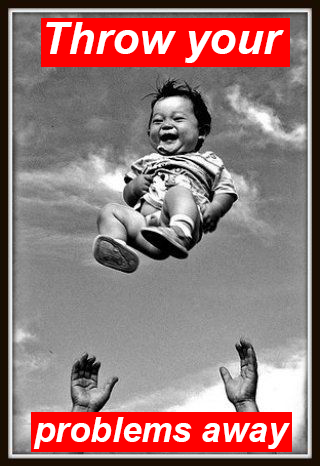
<style>
.page{position:relative;width:320px;height:466px}
.page>*{position:absolute;margin:0}
.t1{font:35px "Arial-BoldItalicMT";color:#ffffff}
.t2{font:44px "Arial-BoldItalicMT";color:#ffffff}
</style>
<div class="page">
<p class="t1" style="left:33px;top:22px;width:257px;height:427px;text-align:center"><span class="t2">Throw your<br><br><br><br><br><br><br><br><br></span>problems away</p>
</div>
